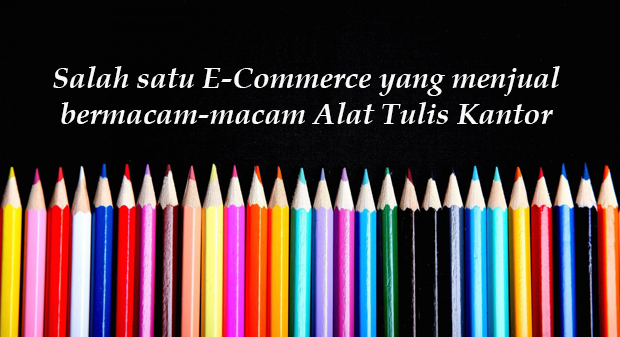
<style>
.page{position:relative;width:620px;height:337px;background:#030303}
.page>*{position:absolute;margin:0}
.t1{font:30px "BookAntiqua-BoldItalic";color:#fbf8f8}
</style>
<div class="page">
<p class="t1" style="left:53px;top:66px;width:507px;height:58px;text-align:center">Salah satu E-Commerce yang menjual<br>bermacam-macam Alat Tulis Kantor</p>
</div>
